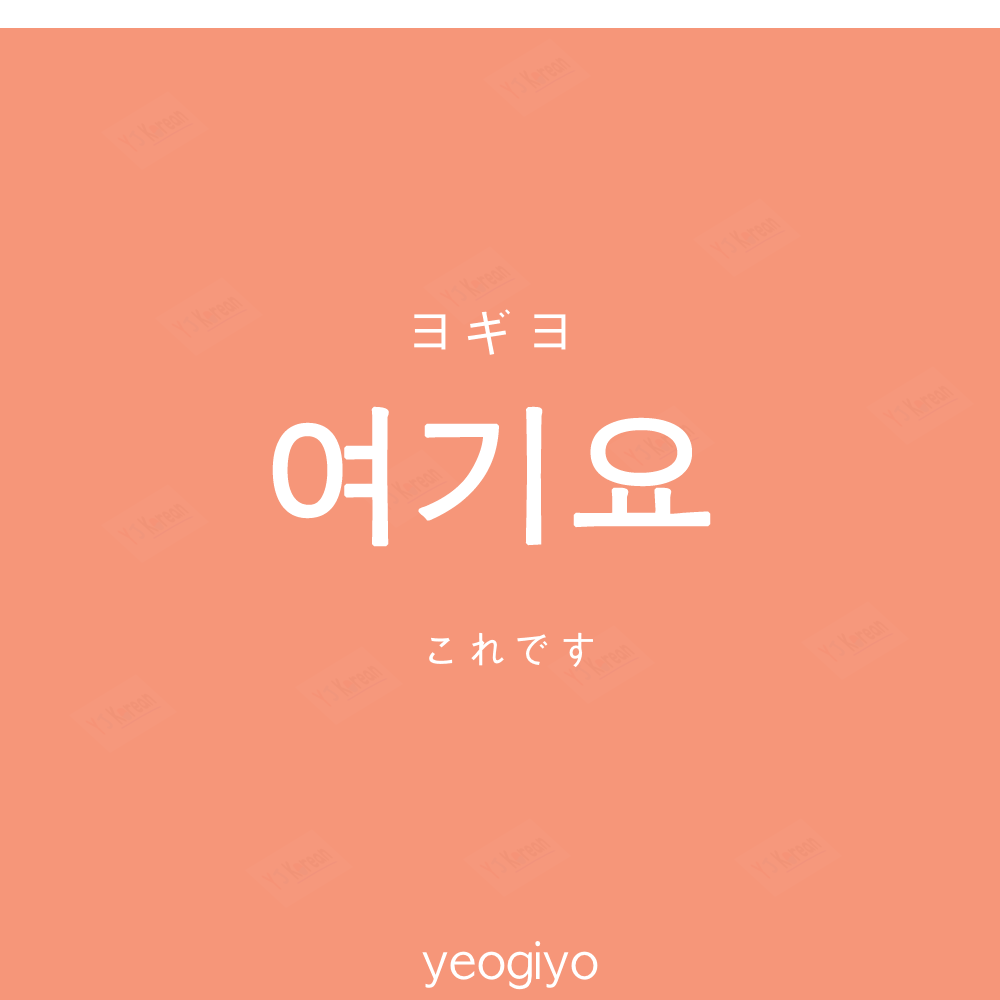
<style>
.page{position:relative;width:1000px;height:1000px;background:#f69679}
.page>*{position:absolute;margin:0}
.t1{font:60px "AppleGothic";color:#ffffff}
.t2{font:150px "AppleGothic";color:#ffffff;font-weight:bold}
.t3{font:45px "AppleGothic";color:#ffffff}
.t4{font:50px "AppleGothic";color:#ffffff}
</style>
<div class="page">
<p class="t1" style="left:414px;top:309px;width:152px;height:46px">ヨギヨ</p>
<p class="t2" style="left:272px;top:406px;width:439px;height:141px">여기요</p>
<p class="t3" style="left:429px;top:632px;width:164px;height:35px">これです</p>
<p class="t4" style="left:422px;top:941px;width:176px;height:49px">yeogiyo</p>
</div>
